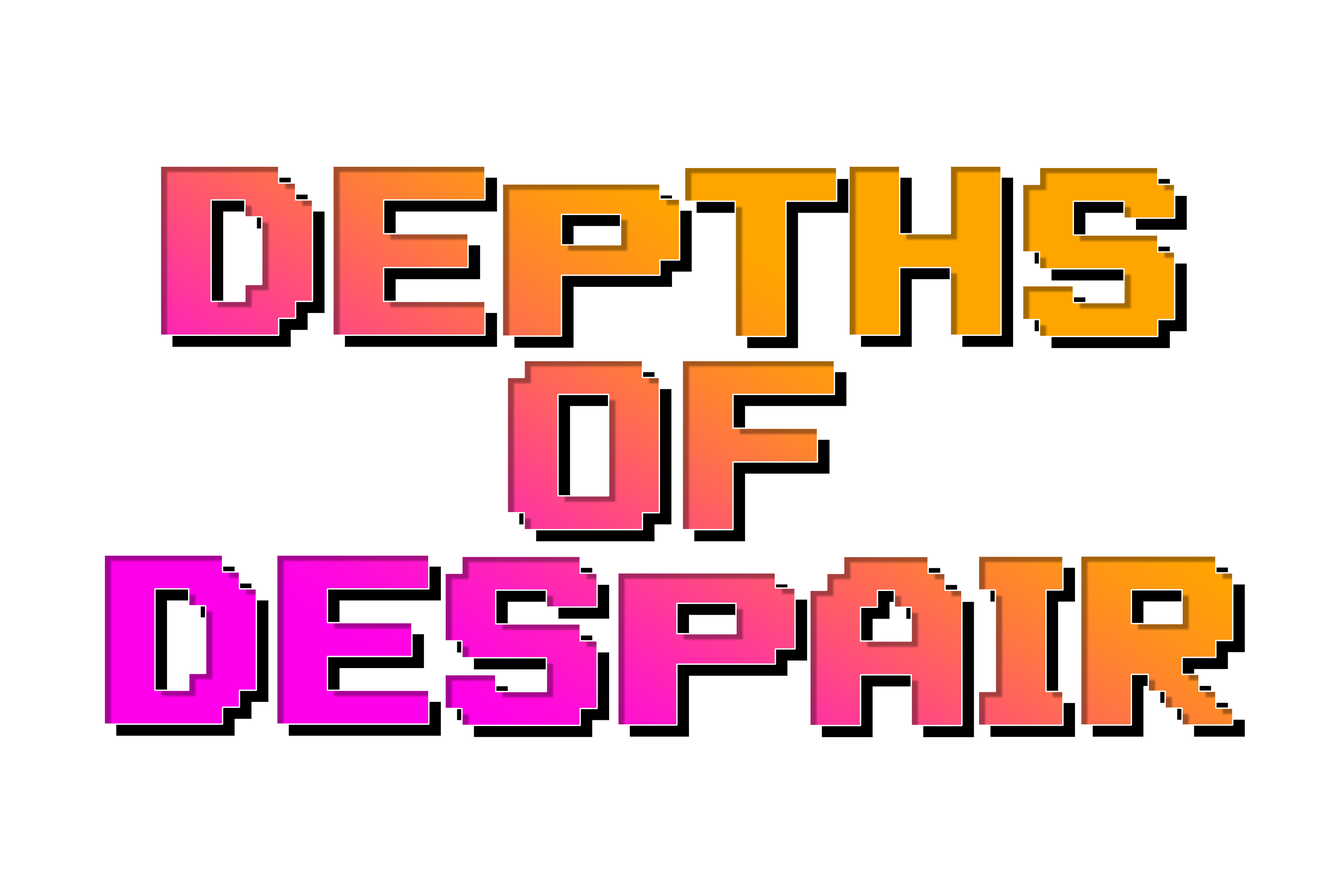
<style>
.page{position:relative;width:1337px;height:892px;background:#ffffff}
.page>*{position:absolute;margin:0}
.t1{font:240.5px/194.4px "AutomBold"}
</style>
<div class="page">
<p class="t1" style="left:104px;top:166px;width:1130px;height:559px;text-align:center">Depths<br> of <br>Despair</p>
<p class="t1" style="left:116px;top:177px;width:1130px;height:560px;text-align:center">Depths<br> of <br>Despair</p>
</div>
